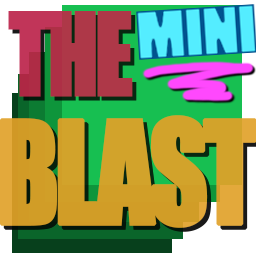
<style>
.page{position:relative;width:256px;height:256px}
.page>*{position:absolute;margin:0}
.t1{font:151.7px "Impact";letter-spacing:-0.06em;color:#ae3848;font-variant:small-caps;font-weight:bold;scale:0.85 1}
.t2{font:131.9px "Impact";letter-spacing:-0.06em;color:#e0a026;font-variant:small-caps;font-weight:bold;scale:0.85 1}
</style>
<div class="page">
<p class="t1" style="left:8px;top:11px;width:125px;height:86px">the</p>
<p class="t2" style="left:0px;top:115px;width:257px;height:113px;opacity:0.9">BLAST</p>
</div>
